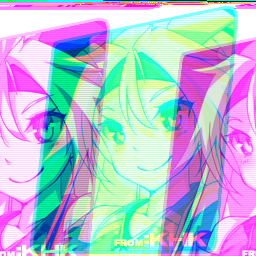
<style>
.page{position:relative;width:256px;height:256px}
.page>*{position:absolute;margin:0}
.t1{font:25px "ASTERA"}
</style>
<div class="page">
<p class="t1" style="left:144px;top:230px;width:63px;height:15px">:KHK</p>
</div>
